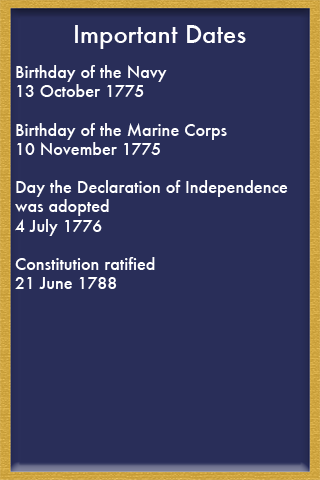
<style>
.page{position:relative;width:320px;height:480px;background:#292e59}
.page>*{position:absolute;margin:0}
.t1{font:24px "Futura-Medium";color:#ffffff}
.t2{font:16px "Futura-Medium";color:#ffffff}
</style>
<div class="page">
<p class="t1" style="left:75px;top:25px;width:171px;height:24px">Important Dates</p>
<p class="t2" style="left:15px;top:65px;width:273px;height:224px">Birthday of the Navy <br>13 October 1775<br><br>Birthday of the Marine Corps  <br>10 November 1775<br><br>Day the Declaration of Independence <br>was adopted <br>4 July 1776<br><br>Constitution ratified <br>21 June 1788</p>
</div>
